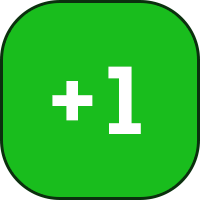
<style>
.page{position:relative;width:200px;height:200px;background:#19bd1d}
.page>*{position:absolute;margin:0}
.t1{font:96px "NexaBold";letter-spacing:-0.04em;color:#ffffff}
</style>
<div class="page">
<p class="t1" style="left:52px;top:66px;width:89px;height:68px">+ 1</p>
</div>
